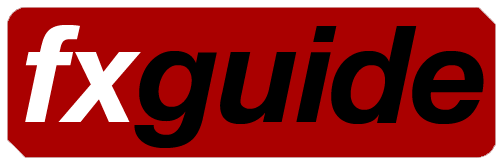
<style>
.page{position:relative;width:500px;height:163px;background:#aa0000}
.page>*{position:absolute;margin:0}
.t1{font:134.8px "HelveticaNeue-BoldItalic";letter-spacing:-0.015em;color:#000000}
.t2{font:134.8px "HelveticaNeue-BoldItalic";letter-spacing:-0.015em;color:#ffffff}
</style>
<div class="page">
<p class="t1" style="left:25px;top:25px;width:459px;height:123px"><span class="t2">fx</span>guide</p>
</div>
